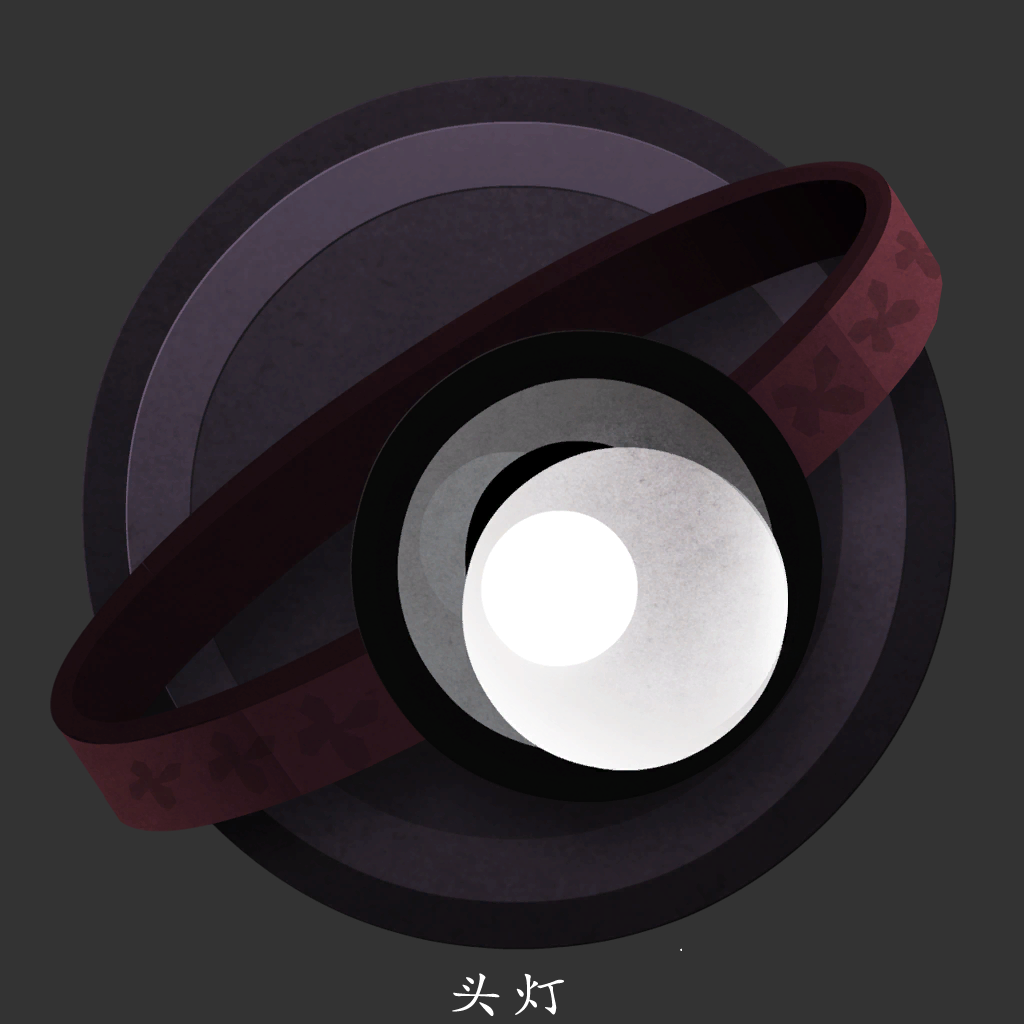
<style>
.page{position:relative;width:1024px;height:1024px;background:#333333}
.page>*{position:absolute;margin:0}
.t1{font:53.3px "STKaiti";letter-spacing:0.1em;color:#ffffff}
</style>
<div class="page">
<p class="t1" style="left:452px;top:973px;width:112px;height:43px">头灯</p>
</div>
